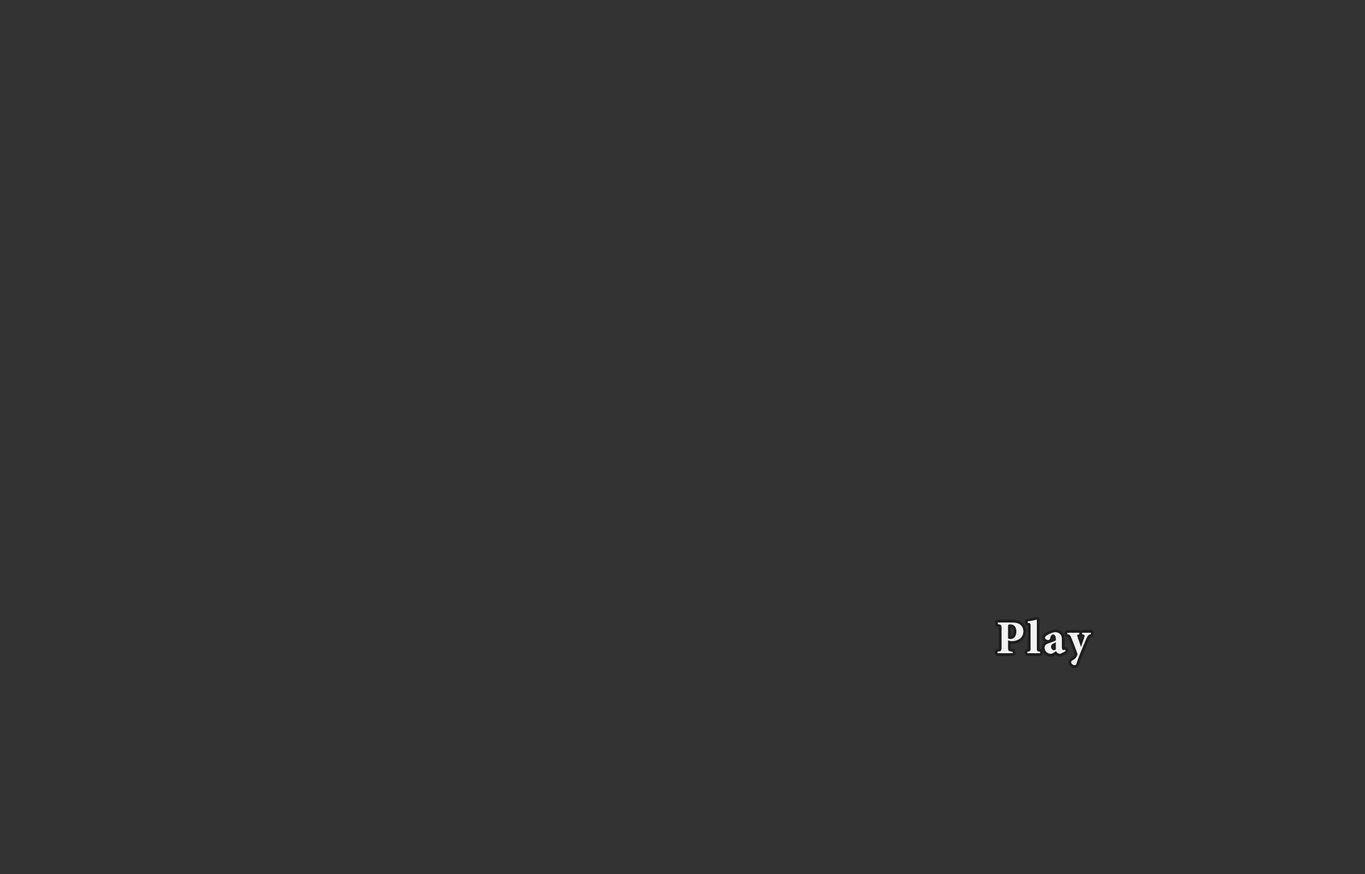
<style>
.page{position:relative;width:1365px;height:874px;background:#333333}
.page>*{position:absolute;margin:0}
.t1{font:47.4px "MinionPro-Bold";letter-spacing:0.05em;color:#f2f2f2}
</style>
<div class="page">
<p class="t1" style="left:998px;top:619px;width:93px;height:46px">Play</p>
</div>
